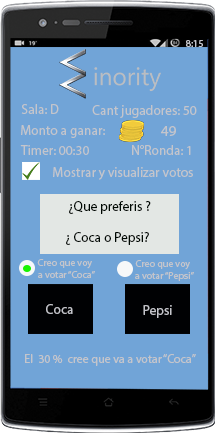
<style>
.page{position:relative;width:215px;height:433px;background:#71a4d7}
.page>*{position:absolute;margin:0}
.t1{font:10px "MyriadPro-Regular";color:#c4c5cb}
.t2{font:13.5px "MyriadPro-Regular";color:#c4c5cb}
.t3{font:15px "MyriadPro-Regular";color:#c4c5cb}
.t4{font:13.5px "MyriadPro-Regular";color:#000903}
.t5{font:12px "MyriadPro-Regular";color:#c4c5cb}
</style>
<div class="page">
<p class="t1" style="left:186px;top:40px;width:17px;height:7px">8:15</p>
<p class="t2" style="left:21px;top:104px;width:38px;height:10px">Sala: D</p>
<p class="t2" style="left:92px;top:105px;width:105px;height:13px">Cant jugadores: 50</p>
<p class="t2" style="left:21px;top:125px;width:84px;height:13px">Monto a ganar:</p>
<p class="t3" style="left:161px;top:126px;width:15px;height:10px">49</p>
<p class="t2" style="left:20px;top:145px;width:69px;height:10px">Timer: 00:30</p>
<p class="t2" style="left:132px;top:145px;width:59px;height:10px">N°Ronda: 1</p>
<p class="t2" style="left:53px;top:167px;width:140px;height:13px">Mostrar y visualizar votos</p>
<p class="t4" style="left:69px;top:201px;width:82px;height:13px">¿Que preferis ?</p>
<p class="t4" style="left:66px;top:232px;width:83px;height:13px">¿ Coca o Pepsi?</p>
<p class="t1" style="left:37px;top:259px;width:58px;height:19px;text-align:center">Creo que voy <br>a votar “Coca”</p>
<p class="t1" style="left:135px;top:260px;width:59px;height:21px;text-align:center">Creo que voy <br>a votar “Pepsi”</p>
<p class="t2" style="left:46px;top:304px;width:27px;height:10px">Coca</p>
<p class="t2" style="left:143px;top:305px;width:29px;height:13px">Pepsi</p>
<p class="t5" style="left:25px;top:354px;width:171px;height:12px">El  30 %  cree que va a votar “Coca”</p>
</div>
